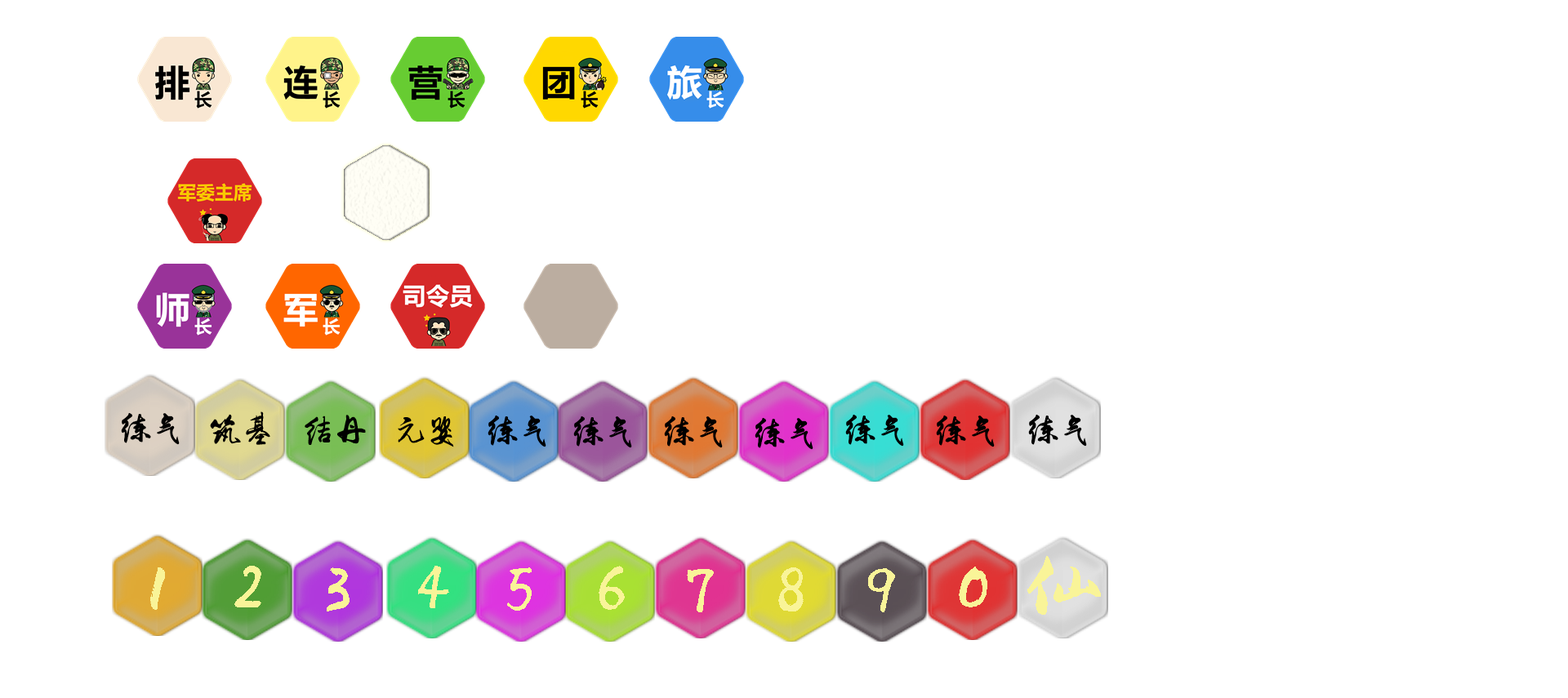
<style>
.page{position:relative;width:1568px;height:698px;background:#ffffff}
.page>*{position:absolute;margin:0}
.t1{font:32.7px "lixukexingshu";color:#000000}
.t2{font:81.7px "lixukexingshu";color:#f9f498}
</style>
<div class="page">
<p class="t1" style="left:121px;top:412px;width:59px;height:33px">练气</p>
<p class="t1" style="left:210px;top:412px;width:60px;height:33px">筑基</p>
<p class="t1" style="left:305px;top:415px;width:61px;height:30px">结丹</p>
<p class="t1" style="left:398px;top:416px;width:56px;height:32px">元婴</p>
<p class="t1" style="left:488px;top:415px;width:58px;height:33px">练气</p>
<p class="t1" style="left:573px;top:416px;width:59px;height:32px">练气</p>
<p class="t1" style="left:664px;top:416px;width:59px;height:32px">练气</p>
<p class="t1" style="left:755px;top:417px;width:58px;height:33px">练气</p>
<p class="t1" style="left:845px;top:414px;width:59px;height:33px">练气</p>
<p class="t1" style="left:936px;top:415px;width:59px;height:33px">练气</p>
<p class="t1" style="left:1028px;top:414px;width:59px;height:33px">练气</p>
<p class="t2" style="left:1027px;top:556px;width:74px;height:59px">仙</p>
<p class="t2" style="left:150px;top:568px;width:15px;height:42px">1</p>
<p class="t2" style="left:234px;top:566px;width:27px;height:42px">2</p>
<p class="t2" style="left:327px;top:568px;width:23px;height:44px">3</p>
<p class="t2" style="left:418px;top:566px;width:31px;height:42px">4</p>
<p class="t2" style="left:507px;top:568px;width:25px;height:43px">5</p>
<p class="t2" style="left:599px;top:566px;width:26px;height:44px">6</p>
<p class="t2" style="left:687px;top:569px;width:27px;height:43px">7</p>
<p class="t2" style="left:778px;top:568px;width:26px;height:44px">8</p>
<p class="t2" style="left:868px;top:568px;width:27px;height:44px">9</p>
<p class="t2" style="left:959px;top:567px;width:28px;height:41px">0</p>
</div>
